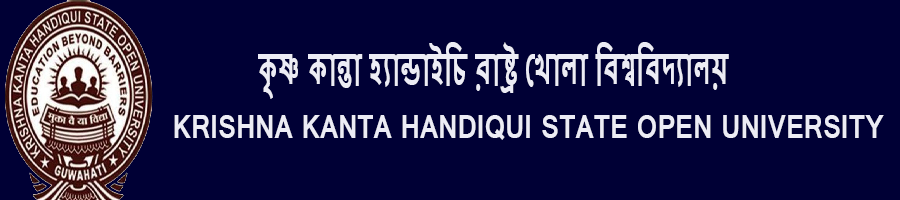
<style>
.page{position:relative;width:900px;height:200px;background:#000035}
.page>*{position:absolute;margin:0}
.t1{font:46.4px "Vrinda-Bold";color:#ececf5;scale:0.55 1}
.t2{font:34.5px "Vrinda-Bold";color:#ececf5;scale:0.83 1}
</style>
<div class="page">
<p class="t1" style="left:258px;top:42px;width:471px;height:57px">কৃষ্ণ কান্তা হ্যান্ডাইচি রাষ্ট্র খোলা বিশ্ববিদ্যালয়</p>
<p class="t2" style="left:174px;top:115px;width:710px;height:25px">KRISHNA KANTA HANDIQUI STATE OPEN UNIVERSITY</p>
</div>
